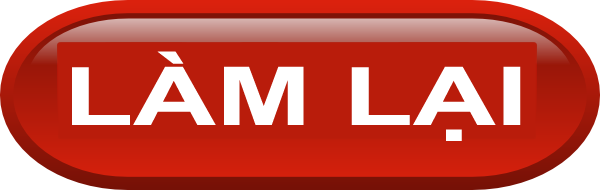
<style>
.page{position:relative;width:600px;height:190px;background:#b91c0b}
.page>*{position:absolute;margin:0}
.t1{font:81.2px "Arial-BoldMT";color:#ffffff;scale:1.41 1}
</style>
<div class="page">
<p class="t1" style="left:72px;top:51px;width:449px;height:90px">LÀM LẠI</p>
</div>
